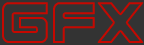
<style>
.page{position:relative;width:144px;height:45px;background:#333333}
.page>*{position:absolute;margin:0}
.t1{font:81.2px "SpaceRangerBold";scale:0.91 1}
</style>
<div class="page">
<p class="t1" style="left:2px;top:2px;width:142px;height:41px">gfx</p>
</div>
